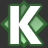
<style>
.page{position:relative;width:48px;height:48px;background:#ffffff}
.page>*{position:absolute;margin:0}
.t1{font:54px "SegoeUI-Bold";color:#ffffff}
</style>
<div class="page">
<p class="t1" style="left:10px;top:6px;width:32px;height:38px">K</p>
</div>
